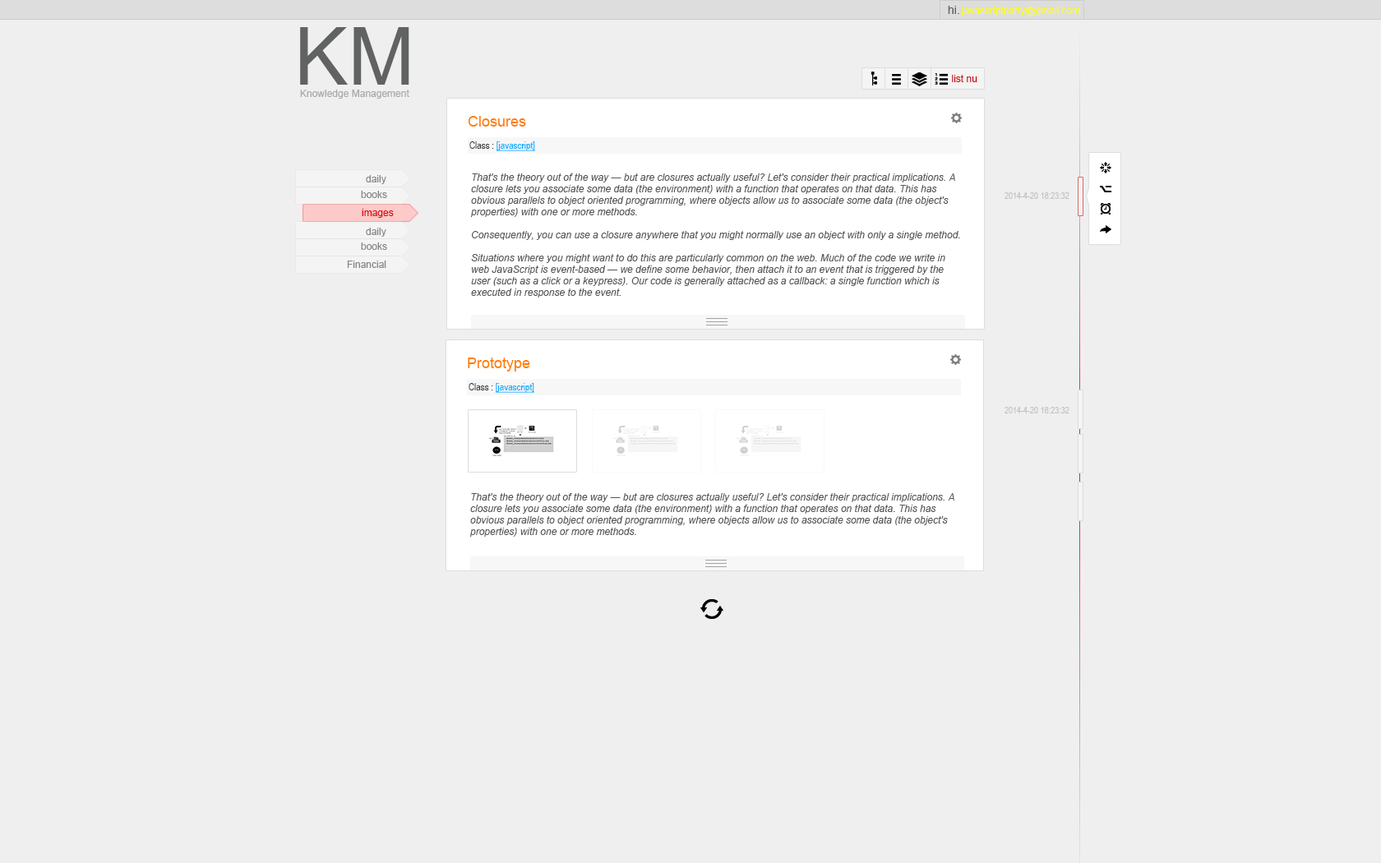
<style>
.page{position:relative;width:1381px;height:863px;background:#efefef}
.page>*{position:absolute;margin:0}
.t1{font:11.5px "ArialMT";color:#616262}
.t2{font:9.9px "ArialMT";color:#fcff00}
.t3{font:80.6px "ArialMT";color:#616262}
.t4{font:9.9px "ArialMT";color:#cb0909}
.t5{font:9.9px "ArialMT";color:#a9a9a9}
.t6{font:14.8px "ArialMT";color:#ff7e00}
.t7{font:9.9px "ArialNarrow";color:#00adfe;text-decoration:underline}
.t8{font:9.9px "ArialNarrow";color:#393939}
.t9{font:9.9px/11.5px "Arial-ItalicMT";color:#585757}
.t10{font:9.9px "ArialMT";color:#858585}
.t11{font:9px "ArialNarrow";color:#c2c2c2}
.t12{font:9.9px "ArialMT";color:#de0000}
</style>
<div class="page">
<p class="t1" style="left:948px;top:6px;width:11px;height:8px">hi.</p>
<p class="t2" style="left:961px;top:7px;width:119px;height:9px">javascriptparty@gmail.com</p>
<p class="t3" style="left:300px;top:27px;width:109px;height:58px">KM</p>
<p class="t4" style="left:952px;top:75px;width:26px;height:7px">list nu</p>
<p class="t5" style="left:300px;top:90px;width:109px;height:9px">Knowledge Management</p>
<p class="t6" style="left:468px;top:116px;width:58px;height:11px">Closures</p>
<p class="t7" style="left:469px;top:141px;width:66px;height:10px"><span class="t8">Class : </span>[javascript]</p>
<p class="t9" style="left:471px;top:173px;width:489px;height:125px">That's the theory out of the way — but are closures actually useful? Let's consider their practical implications. A closure lets you associate some data (the environment) with a function that operates on that data. This has obvious parallels to object oriented programming, where objects allow us to associate some data (the object's properties) with one or more methods.<br><br>Consequently, you can use a closure anywhere that you might normally use an object with only a single method.<br><br>Situations where you might want to do this are particularly common on the web. Much of the code we write in web JavaScript is event-based — we define some behavior, then attach it to an event that is triggered by the user (such as a click or a keypress). Our code is generally attached as a callback: a single function which is executed in response to the event.</p>
<p class="t10" style="left:366px;top:175px;width:20px;height:9px">daily</p>
<p class="t10" style="left:361px;top:191px;width:26px;height:7px">books</p>
<p class="t11" style="left:1005px;top:192px;width:65px;height:7px">2014-4-20 18:23:32</p>
<p class="t12" style="left:362px;top:209px;width:32px;height:9px">images</p>
<p class="t10" style="left:366px;top:228px;width:20px;height:9px">daily</p>
<p class="t10" style="left:361px;top:243px;width:26px;height:7px">books</p>
<p class="t10" style="left:347px;top:261px;width:39px;height:7px">Financial</p>
<p class="t6" style="left:468px;top:358px;width:62px;height:14px">Prototype</p>
<p class="t7" style="left:469px;top:383px;width:65px;height:10px"><span class="t8">Class : </span>[javascript]</p>
<p class="t11" style="left:1005px;top:407px;width:65px;height:7px">2014-4-20 18:23:32</p>
<p class="t9" style="left:470px;top:493px;width:485px;height:44px">That's the theory out of the way — but are closures actually useful? Let's consider their practical implications. A closure lets you associate some data (the environment) with a function that operates on that data. This has obvious parallels to object oriented programming, where objects allow us to associate some data (the object's properties) with one or more methods.</p>
</div>
